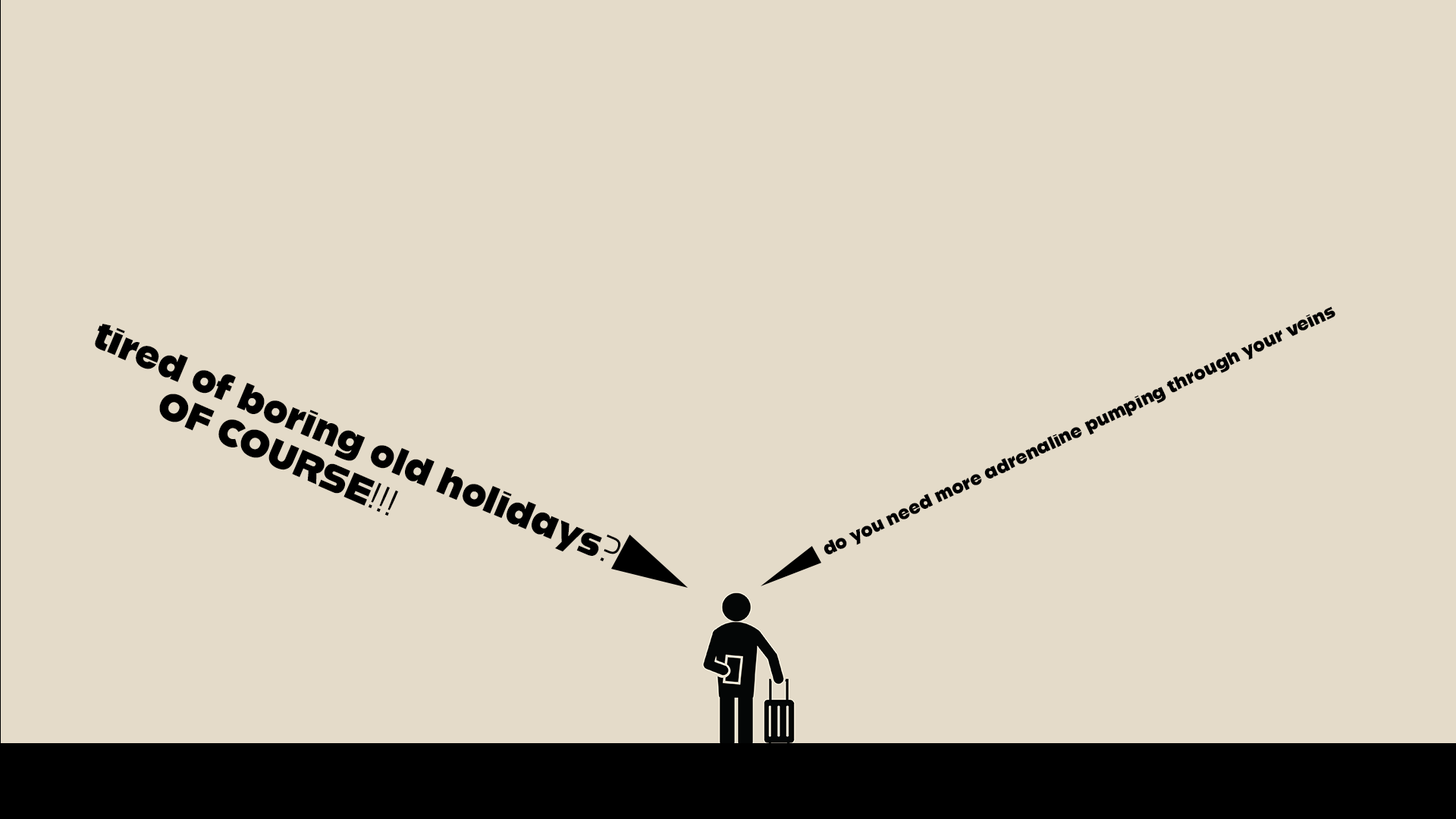
<style>
.page{position:relative;width:1456px;height:819px;background:#e4dbc9}
.page>*{position:absolute;margin:0}
.t1{font:18.2px "Alfarn2";color:#000000}
.t2{font:37.9px "Alfarn2";color:#000000}
</style>
<div class="page">
<p class="t1" style="left:824px;top:306px;width:511px;height:248px;rotate:-25deg">do you need more adrenaline pumping through your veins</p>
<p class="t2" style="left:95px;top:324px;width:526px;height:238px;rotate:23deg">tired of boring old holidays?</p>
<p class="t2" style="left:159px;top:394px;width:239px;height:122px;rotate:23deg">OF COURSE!!!</p>
</div>
